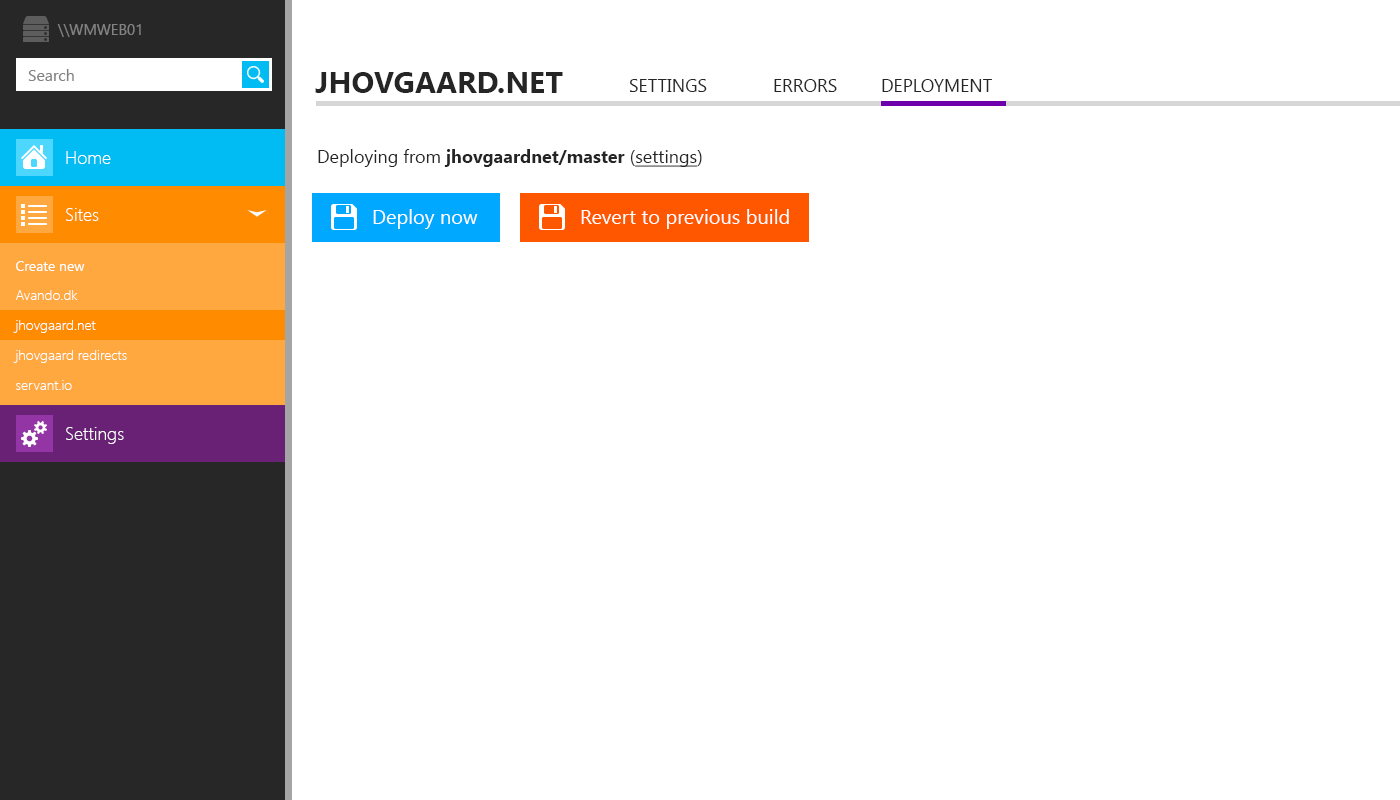
<style>
.page{position:relative;width:1400px;height:800px;background:#ffffff}
.page>*{position:absolute;margin:0}
.t1{font:15px "SegoeUI";color:#828282}
.t2{font:16px "SegoeUI";color:#828282}
.t3{font:30px "SegoeUI-Bold";color:#252525;text-transform:uppercase}
.t4{font:18px "SegoeUI";color:#252525;text-transform:uppercase}
.t5{font:18px "SegoeUI-Bold";color:#252525}
.t6{font:18px "SegoeUI";color:#252525}
.t7{font:18px "SegoeUI";color:#252525;text-decoration:underline}
.t8{font:18px "SegoeUI-Light";color:#ffffff}
.t9{font:20px "SegoeUI";color:#ffffff}
.t10{font:14px/30px "SegoeUI-Light";color:#ffffff}
.t11{font:14px/30px "SegoeUI";color:#ffffff}
</style>
<div class="page">
<p class="t1" style="left:57px;top:24px;width:84px;height:13px">\\WMWEB01</p>
<p class="t2" style="left:28px;top:69px;width:46px;height:12px">Search</p>
<p class="t3" style="left:315px;top:72px;width:248px;height:21px">jhovgaard.net</p>
<p class="t4" style="left:629px;top:79px;width:363px;height:13px">Settings  Errors  DEPLOYMENT</p>
<p class="t5" style="left:318px;top:149px;width:384px;height:18px"><span class="t6">Deploying from </span>jhovgaardnet/master <span class="t6">(</span><span class="t7">settings</span><span class="t6">)</span></p>
<p class="t8" style="left:66px;top:151px;width:45px;height:13px">Home</p>
<p class="t8" style="left:66px;top:208px;width:33px;height:13px">Sites</p>
<p class="t9" style="left:373px;top:209px;width:105px;height:20px">Deploy now</p>
<p class="t9" style="left:581px;top:209px;width:208px;height:20px">Revert to previous build</p>
<p class="t10" style="left:13px;top:261px;width:114px;height:129px"><span class="t11">Create new<br></span>Avando.dk<br>jhovgaard.net<br>jhovgaard redirects<br>servant.io</p>
<p class="t8" style="left:66px;top:427px;width:58px;height:17px">Settings</p>
</div>
